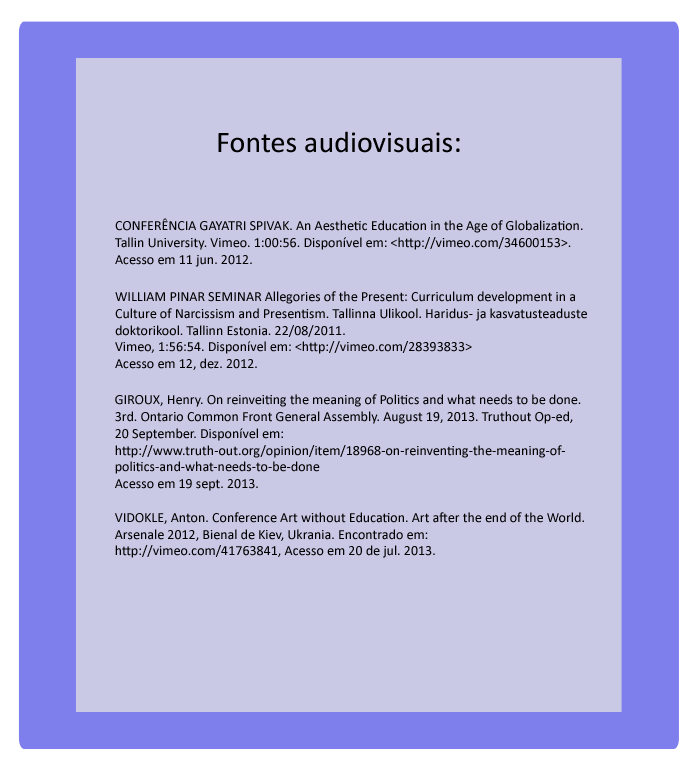
<style>
.page{position:relative;width:700px;height:768px;background:#c9c9e6}
.page>*{position:absolute;margin:0}
.t1{font:30px "Calibri";color:#000000}
.t2{font:14px "Calibri";color:#000000}
</style>
<div class="page">
<p class="t1" style="left:218px;top:131px;width:242px;height:22px">Fontes audiovisuais:</p>
<p class="t2" style="left:115px;top:218px;width:468px;height:49px">CONFERÊNCIA GAYATRI SPIVAK. An Aesthetic Education in the Age of Globalization. <br>Tallin University. Vimeo. 1:00:56. Disponível em: &lt;http://vimeo.com/34600153&gt;. <br>Acesso em 11 jun. 2012.</p>
<p class="t2" style="left:115px;top:291px;width:472px;height:79px">WILLIAM PINAR SEMINAR Allegories of the Present: Curriculum development in a <br>Culture of Narcissism and Presentism. Tallinna Ulikool. Haridus- ja kasvatusteaduste <br>doktorikool. Tallinn Estonia. 22/08/2011. <br>Vimeo, 1:56:54. Disponível em: &lt;http://vimeo.com/28393833&gt; <br>Acesso em 12, dez. 2012.</p>
<p class="t2" style="left:115px;top:394px;width:469px;height:164px">GIROUX, Henry. On reinveiting the meaning of Politics and what needs to be done.<br>3rd. Ontario Common Front General Assembly. August 19, 2013. Truthout Op-ed,  <br>20 September. Disponível em: <br>http://www.truth-out.org/opinion/item/18968-on-reinventing-the-meaning-of-<br>politics-and-what-needs-to-be-done<br>Acesso em 19 sept. 2013.<br><br>VIDOKLE, Anton. Conference Art without Education. Art after the end of the World.  <br>Arsenale 2012, Bienal de Kiev, Ukrania. Encontrado em: <br>http://vimeo.com/41763841, Acesso em 20 de jul. 2013.</p>
</div>
